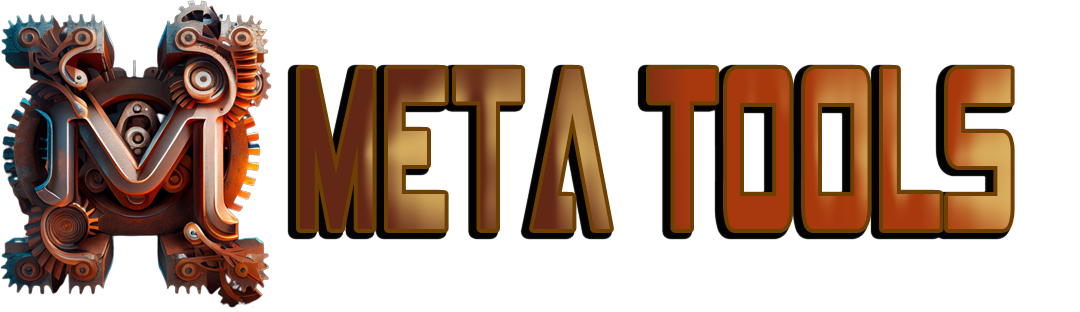
<style>
.page{position:relative;width:1080px;height:312px;background:#ffffff}
.page>*{position:absolute;margin:0}
.t1{font:200px "GAMECUBENDualSet";scale:0.33 1}
</style>
<div class="page">
<p class="t1" style="left:300px;top:69px;width:711px;height:160px">META TOOLS</p>
</div>
